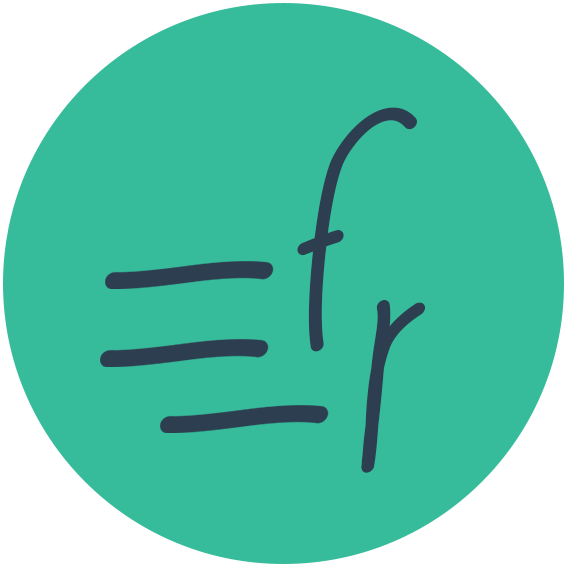
<style>
.page{position:relative;width:568px;height:568px;background:#37bc9b}
.page>*{position:absolute;margin:0}
.t1{font:275px/128.4px "LaFamilia";letter-spacing:0.01em;color:#2c3e50;font-style:italic}
</style>
<div class="page">
<p class="t1" style="left:297px;top:107px;width:129px;height:366px;text-align:center">F<br> R</p>
</div>
